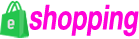
<style>
.page{position:relative;width:139px;height:39px;background:#ffffff}
.page>*{position:absolute;margin:0}
.t1{font:52px "KittithadaBold75Italic";color:#ff02d8;scale:0.73 1}
</style>
<div class="page">
<p class="t1" style="left:29px;top:4px;width:110px;height:33px">shopping</p>
</div>
